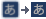
<style>
.page{position:relative;width:46px;height:19px;background:#ffffff}
.page>*{position:absolute;margin:0}
.t1{font:12px "KozGoPr6N-Regular";color:#a9a9a9}
</style>
<div class="page">
<p class="t1" style="left:33px;top:4px;width:11px;height:11px">あ</p>
</div>
